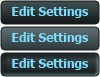
<style>
.page{position:relative;width:100px;height:77px}
.page>*{position:absolute;margin:0}
.t1{font:12px "Tahoma-Bold";color:#7cdefe}
</style>
<div class="page">
<p class="t1" style="left:12px;top:6px;width:76px;height:12px">Edit Settings</p>
<p class="t1" style="left:12px;top:32px;width:76px;height:12px">Edit Settings</p>
<p class="t1" style="left:12px;top:58px;width:76px;height:12px">Edit Settings</p>
</div>
